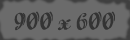
<style>
.page{position:relative;width:130px;height:40px;background:#6b6b6b}
.page>*{position:absolute;margin:0}
.t1{font:20.8px "MinusmanC";color:#343434}
</style>
<div class="page">
<p class="t1" style="left:14px;top:11px;width:101px;height:20px">900 x 600</p>
</div>
